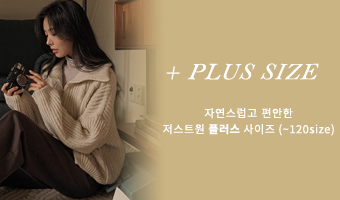
<style>
.page{position:relative;width:340px;height:200px;background:#cbb483}
.page>*{position:absolute;margin:0}
.t1{font:24px "BellMTItalic";letter-spacing:0.05em;color:#ffffff;font-style:italic}
.t2{font:11px/16px "NotoSansKR-Regular";letter-spacing:0.05em;color:#ffffff}
.t3{font:11px/16px "NotoSansKR-Bold";letter-spacing:0.05em;color:#ffffff}
</style>
<div class="page">
<p class="t1" style="left:166px;top:63px;width:153px;height:17px">+ PLUS SIZE</p>
<p class="t2" style="left:163px;top:108px;width:171px;height:28px;text-align:center">자연스럽고 편안한<br>저스트원<span class="t3"> 플러스</span> 사이즈 (~120size)</p>
</div>
